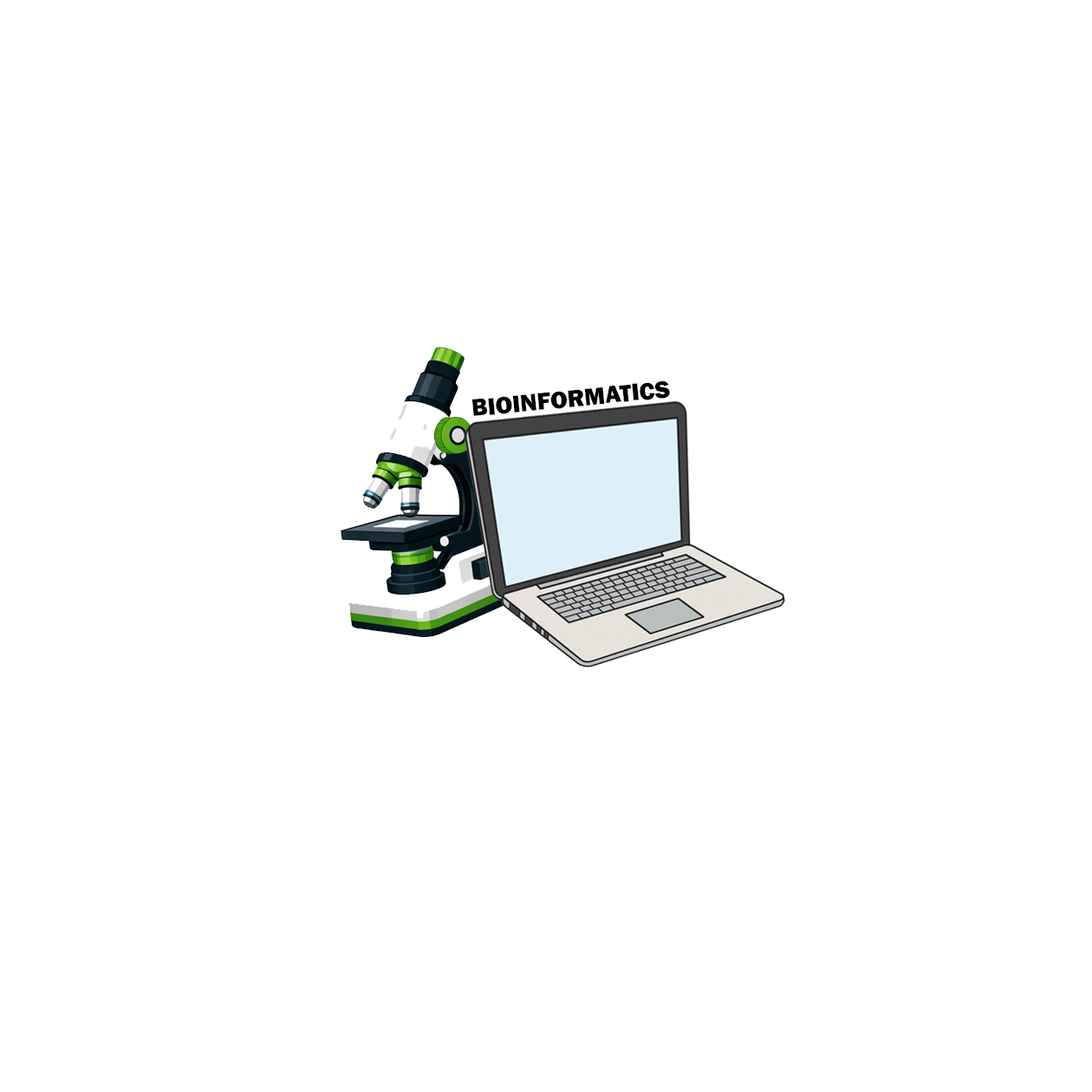
<style>
.page{position:relative;width:1092px;height:1092px;background:#ffffff}
.page>*{position:absolute;margin:0}
.t1{font:24.7px "FranklinGothic-Heavy";color:#000000}
</style>
<div class="page">
<p class="t1" style="left:471px;top:380px;width:199px;height:36px;rotate:-6deg">BIOINFORMATICS</p>
</div>
